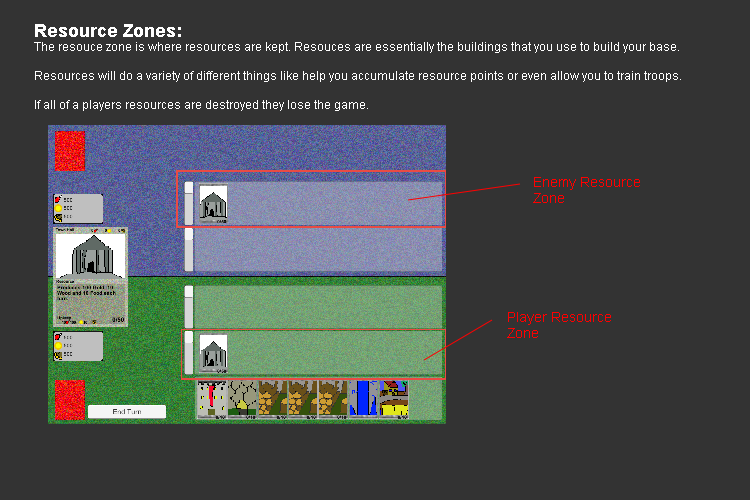
<style>
.page{position:relative;width:750px;height:500px;background:#333333}
.page>*{position:absolute;margin:0}
.t1{font:12px "ArialMT";color:#ffffff}
.t2{font:18px "Arial-BoldMT";color:#ffffff}
.t3{font:14px "ArialMT";color:#ff0000}
</style>
<div class="page">
<p class="t1" style="left:34px;top:24px;width:647px;height:87px"><span class="t2">Resource Zones:<br></span>The resouce zone is where resources are kept. Resouces are essentially the buildings that you use to build your base.<br><br>Resources will do a variety of different things like help you accumulate resource points or even allow you to train troops.<br><br>If all of a players resources are destroyed they lose the game.</p>
<p class="t3" style="left:533px;top:177px;width:107px;height:26px">Enemy Resource<br>Zone</p>
<p class="t3" style="left:507px;top:312px;width:104px;height:26px">Player Resource<br>Zone</p>
</div>
